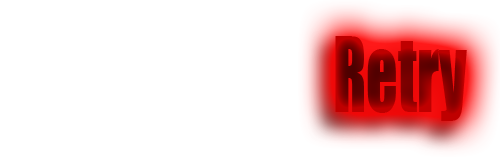
<style>
.page{position:relative;width:500px;height:160px;background:#ffffff}
.page>*{position:absolute;margin:0}
.t1{font:96px "Impact";scale:0.65 1}
</style>
<div class="page">
<p class="t1" style="left:335px;top:36px;width:132px;height:85px">Retry</p>
</div>
